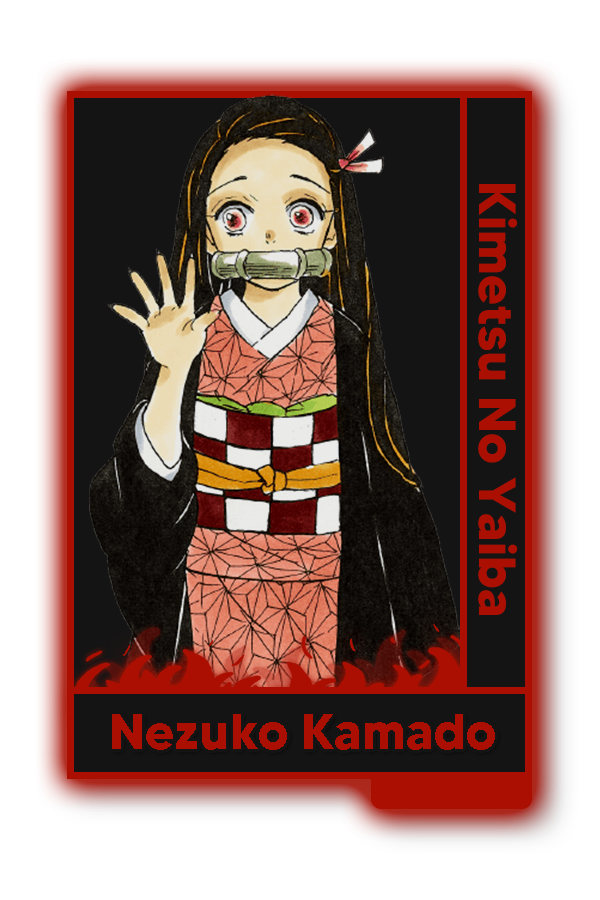
<style>
.page{position:relative;width:600px;height:900px;background:#141414}
.page>*{position:absolute;margin:0}
.t1{font:52px "MADETOMMY-Bold";color:#ab0f01}
.t2{font:50.5px "MADETOMMY-Bold";color:#ab0f01}
</style>
<div class="page">
<p class="t1" style="left:478px;top:184px;width:40px;height:431px;rotate:90deg">Kimetsu No Yaiba</p>
<p class="t2" style="left:112px;top:714px;width:383px;height:36px">Nezuko Kamado</p>
</div>
